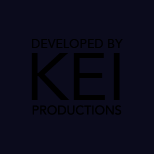
<style>
.page{position:relative;width:154px;height:154px;background:#0b0b1c}
.page>*{position:absolute;margin:0}
.t1{font:12.5px "Avenir-Roman";color:#000000}
.t2{font:66.7px "Avenir-Roman";color:#000000}
</style>
<div class="page">
<p class="t1" style="left:32px;top:39px;width:91px;height:9px">DEVELOPED BY</p>
<p class="t2" style="left:31px;top:53px;width:89px;height:47px">KEI</p>
<p class="t1" style="left:32px;top:105px;width:90px;height:10px">PRODUCTIONS</p>
</div>
